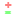
<style>
.page{position:relative;width:16px;height:16px;background:#ffffff}
.page>*{position:absolute;margin:0}
.t1{font:12px "Braggadocio";letter-spacing:-0.144em;color:#fe7f7f}
.t2{font:12px "Braggadocio";letter-spacing:-0.144em;color:#7fff7f}
</style>
<div class="page">
<p class="t1" style="left:5px;top:2px;width:7px;height:6px">+</p>
<p class="t2" style="left:4px;top:11px;width:8px;height:3px">-</p>
</div>
